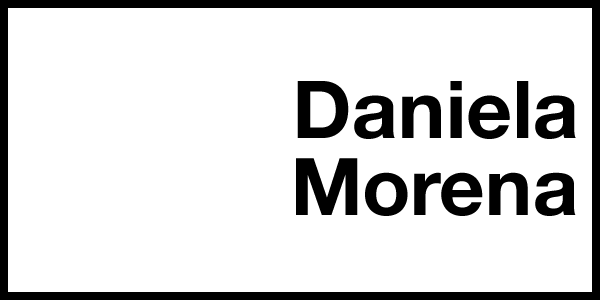
<style>
.page{position:relative;width:600px;height:300px;background:#ffffff}
.page>*{position:absolute;margin:0}
.t1{font:80px/77px "HelveticaNeue-Bold";color:#000000}
.t2{font:79.5px/77px "HelveticaNeue-Bold";color:#000000}
</style>
<div class="page">
<p class="t1" style="left:296px;top:81px;width:280px;height:135px;text-align:right">Daniela<br><span class="t2">Morena</span></p>
</div>
